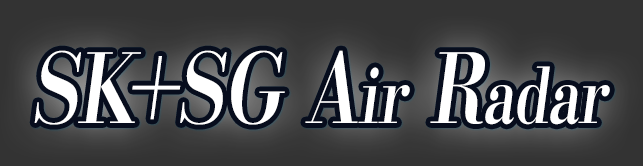
<style>
.page{position:relative;width:643px;height:166px;background:#333333}
.page>*{position:absolute;margin:0}
.t1{font:96px "KochoStd-Heavy";letter-spacing:-0.01em;color:#ffffff;font-style:italic;scale:0.75 1}
.t2{font:76.8px "KochoStd-Heavy";letter-spacing:-0.01em;color:#ffffff;font-style:italic;scale:0.75 1}
</style>
<div class="page">
<p class="t1" style="left:34px;top:50px;width:576px;height:75px">SK+SG A<span class="t2">ir</span> R<span class="t2">adar</span></p>
</div>
